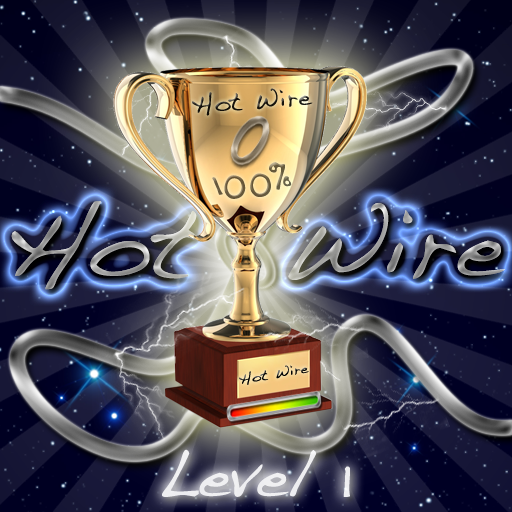
<style>
.page{position:relative;width:512px;height:512px}
.page>*{position:absolute;margin:0}
.t1{font:27.5px "Handwriting-Dakota";scale:0.94 1}
.t2{font:41.3px "Handwriting-Dakota";color:#675d41;scale:0.94 1}
.t3{font:14.8px "Handwriting-Dakota"}
.t4{font:66px "Handwriting-Dakota";color:#ffffff}
</style>
<div class="page">
<p class="t1" style="left:192px;top:88px;width:121px;height:28px;rotate:-4deg">Hot Wire</p>
<p class="t2" style="left:212px;top:162px;width:80px;height:37px;rotate:-4deg">100%</p>
<p class="t3" style="left:239px;top:365px;width:70px;height:20px;rotate:-10deg">Hot Wire</p>
<p class="t4" style="left:162px;top:449px;width:188px;height:48px;opacity:0.93">Level 1</p>
</div>
